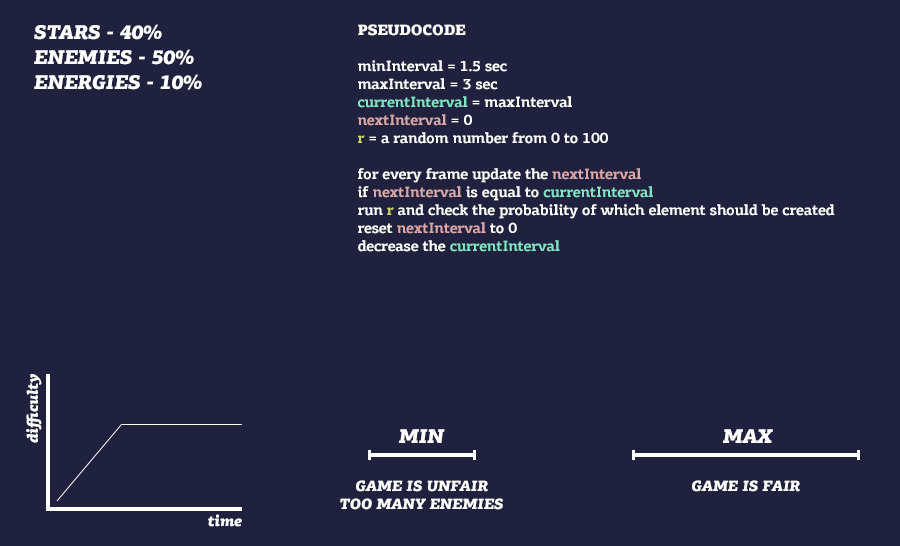
<style>
.page{position:relative;width:900px;height:546px;background:#20213e}
.page>*{position:absolute;margin:0}
.t1{font:20px/25px "PFAgoraSlabPro-BlackItalic";letter-spacing:-0.02em;color:#ffffff;text-transform:uppercase}
.t2{font:15px/18px "PFAgoraSlabPro-Bold";letter-spacing:-0.02em;color:#ffffff}
.t3{font:15px/18px "PFAgoraSlabPro-Black";letter-spacing:-0.02em;color:#ffffff}
.t4{font:15px/18px "PFAgoraSlabPro-Bold";letter-spacing:-0.02em;color:#83e4c5}
.t5{font:15px/18px "PFAgoraSlabPro-Bold";letter-spacing:-0.02em;color:#dba7a7}
.t6{font:15px/18px "PFAgoraSlabPro-Bold";letter-spacing:-0.02em;color:#ced560}
.t7{font:15px "PFAgoraSlabPro-BlackItalic";letter-spacing:-0.02em;color:#ffffff}
.t8{font:20px "PFAgoraSlabPro-BlackItalic";letter-spacing:-0.02em;color:#ffffff;text-transform:uppercase}
.t9{font:15px/18px "PFAgoraSlabPro-BlackItalic";letter-spacing:-0.02em;color:#ffffff;text-transform:uppercase}
.t10{font:15px "PFAgoraSlabPro-BlackItalic";letter-spacing:-0.02em;color:#ffffff;text-transform:uppercase}
</style>
<div class="page">
<p class="t1" style="left:34px;top:24px;width:168px;height:66px">Stars - 40%<br>enemies - 50%<br>energies - 10%</p>
<p class="t2" style="left:358px;top:24px;width:477px;height:228px"><span class="t3">PSEUDOCODE<br><br></span>minInterval = 1.5 sec<br>maxInterval = 3 sec<br><span class="t4">currentInterval </span>= maxInterval<br><span class="t5">nextInterval </span>= 0<br><span class="t6">r </span>= a random number from 0 to 100<br><br>for every frame update the <span class="t5">nextInterval<br></span>if <span class="t5">nextInterval </span>is equal to <span class="t4">currentInterval <br></span>run <span class="t6">r </span>and check the probability of which element should be created<br>reset <span class="t5">nextInterval </span>to 0<br>decrease the <span class="t4">currentInterval</span></p>
<p class="t7" style="left:26px;top:374px;width:16px;height:69px;rotate:-90deg">difficulty</p>
<p class="t8" style="left:398px;top:429px;width:47px;height:14px">min</p>
<p class="t8" style="left:722px;top:429px;width:51px;height:14px">MAX</p>
<p class="t9" style="left:340px;top:480px;width:163px;height:30px;text-align:center">game is unfair<br>too many enemies</p>
<p class="t10" style="left:692px;top:480px;width:108px;height:12px">game is fair</p>
<p class="t7" style="left:208px;top:514px;width:34px;height:13px">time</p>
</div>
